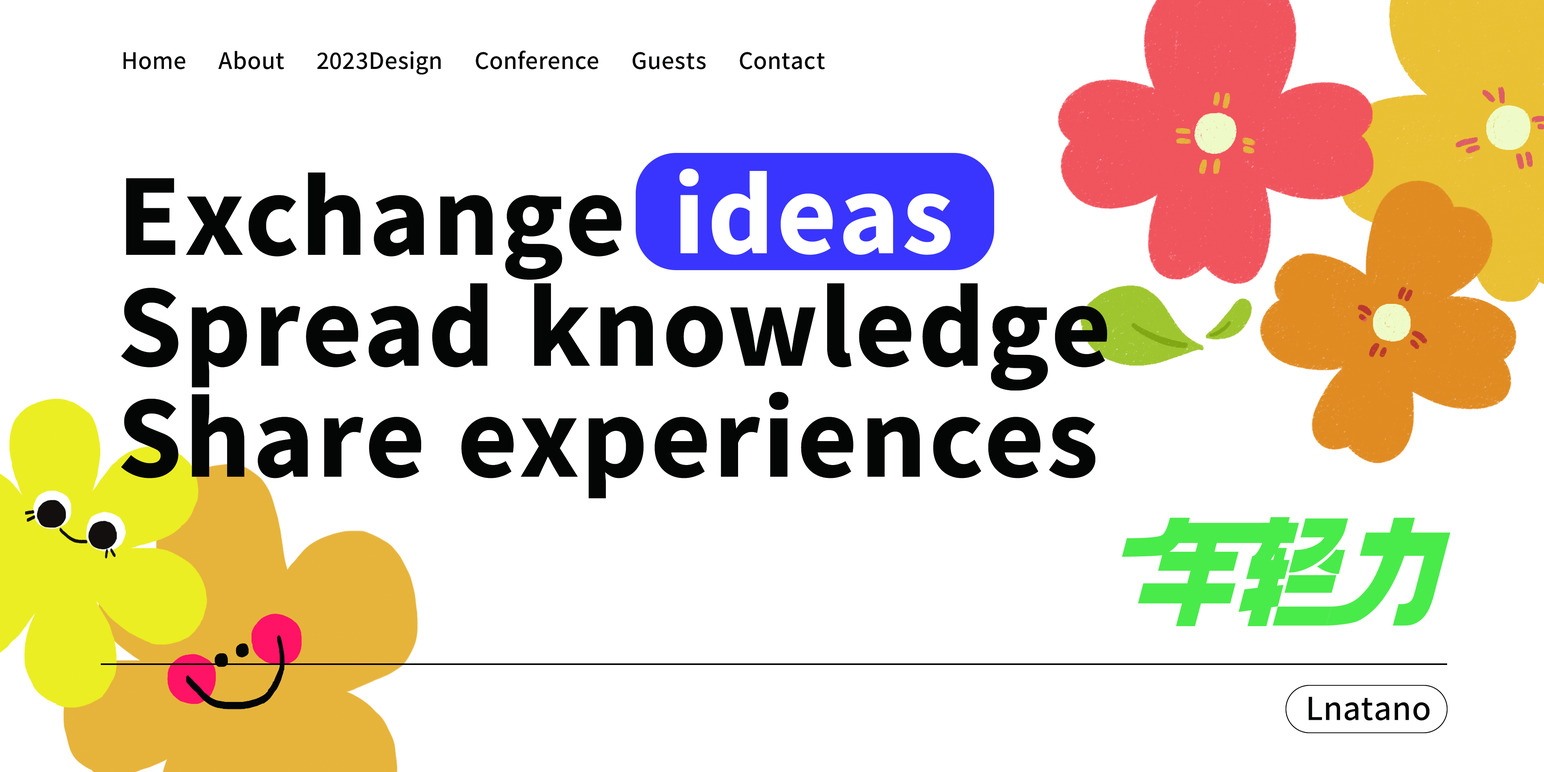
<style>
.page{position:relative;width:1544px;height:772px;background:#ffffff}
.page>*{position:absolute;margin:0}
.t1{font:22.5px "DreamHanSansCN-W15";letter-spacing:0.04em;color:#040606}
.t2{font:103px/111.2px "DreamHanSansCN-W25";letter-spacing:0.04em;color:#040606}
.t3{font:103px "DreamHanSansCN-W25";letter-spacing:0.04em;color:#ffffff}
.t4{font:31.3px "DreamHanSansCN-W15";letter-spacing:0.04em;color:#040606}
</style>
<div class="page">
<p class="t1" style="left:124px;top:51px;width:701px;height:24px">Home About 2023Design Conference Guests Contact</p>
<p class="t2" style="left:121px;top:173px;width:986px;height:325px">Exchange<br>Spread knowledge<br>Share experiences</p>
<p class="t3" style="left:679px;top:169px;width:272px;height:86px">ideas</p>
<p class="t4" style="left:1309px;top:697px;width:121px;height:24px">Lnatano</p>
</div>
